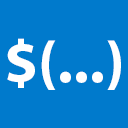
<style>
.page{position:relative;width:128px;height:128px;background:#007acc}
.page>*{position:absolute;margin:0}
.t1{font:61.4px "MyriadPro-Bold";color:#ffffff}
</style>
<div class="page">
<p class="t1" style="left:7px;top:38px;width:114px;height:52px">$(...)</p>
</div>
